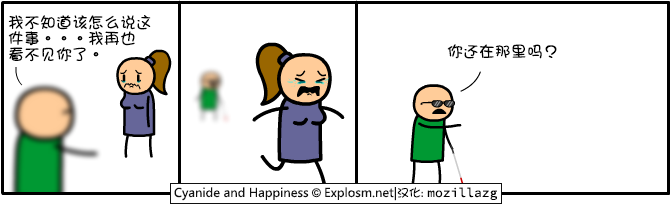
<style>
.page{position:relative;width:671px;height:205px;background:#ffffff}
.page>*{position:absolute;margin:0}
.t1{font:16px/16px "DFGirl";color:#000000}
.t2{font:16px "DFGirl";color:#000000}
</style>
<div class="page">
<p class="t1" style="left:8px;top:15px;width:143px;height:47px">我不知道该怎么说这<br>件事。。。我再也<br>看不见你了。</p>
<p class="t2" style="left:447px;top:44px;width:110px;height:15px">你还在那里吗？</p>
</div>
